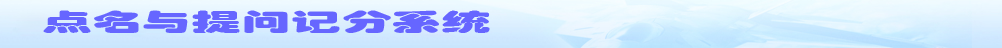
<style>
.page{position:relative;width:1002px;height:48px}
.page>*{position:absolute;margin:0}
.t1{font:24px "STHupo";color:#6666ff;scale:2.08 1}
</style>
<div class="page">
<p class="t1" style="left:43px;top:10px;width:447px;height:23px">点名与提问记分系统</p>
</div>
